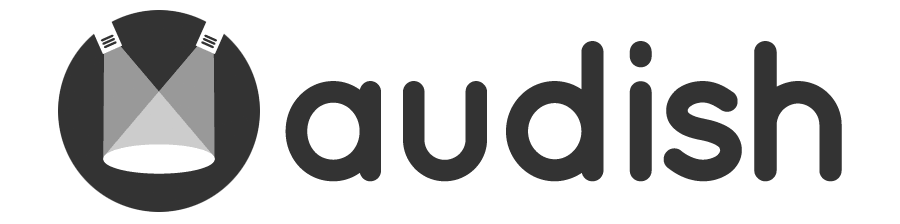
<style>
.page{position:relative;width:900px;height:224px;background:#ffffff}
.page>*{position:absolute;margin:0}
.t1{font:200px "Quicksand-Bold";letter-spacing:-0.075em;color:#333333}
</style>
<div class="page">
<p class="t1" style="left:285px;top:41px;width:557px;height:141px">audish</p>
</div>
